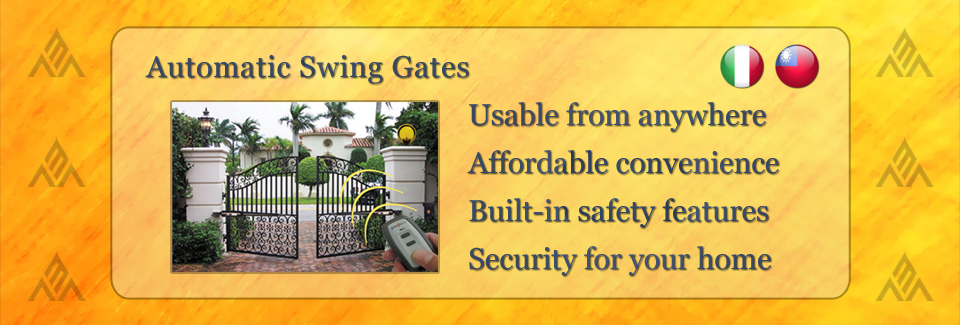
<style>
.page{position:relative;width:960px;height:325px}
.page>*{position:absolute;margin:0}
.t1{font:30px "Georgia";letter-spacing:0.025em;color:#364866}
.t2{font:30px/48px "Georgia";color:#374a69}
</style>
<div class="page">
<p class="t1" style="left:145px;top:55px;width:324px;height:29px">Automatic Swing Gates</p>
<p class="t2" style="left:467px;top:102px;width:312px;height:174px">Usable from anywhere<br>Affordable convenience<br>Built-in safety features<br>Security for your home</p>
</div>
